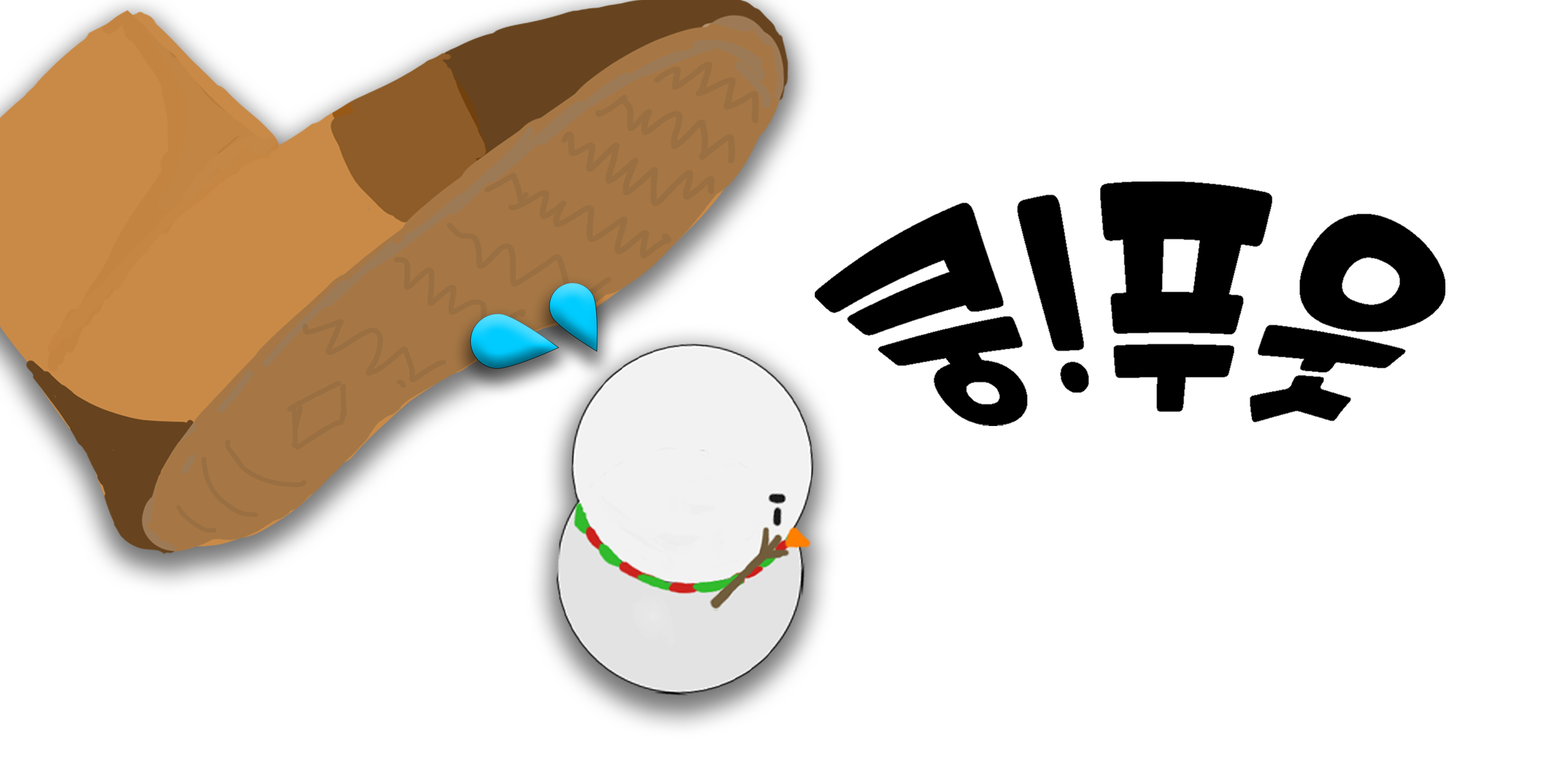
<style>
.page{position:relative;width:1566px;height:762px;background:#ffffff}
.page>*{position:absolute;margin:0}
.t1{font:184.1px "CookieRun-Bold";letter-spacing:0.02em;color:#000000;scale:0.81 1}
</style>
<div class="page">
<p class="t1" style="left:815px;top:181px;width:630px;height:245px">쿵!푸웃</p>
</div>
